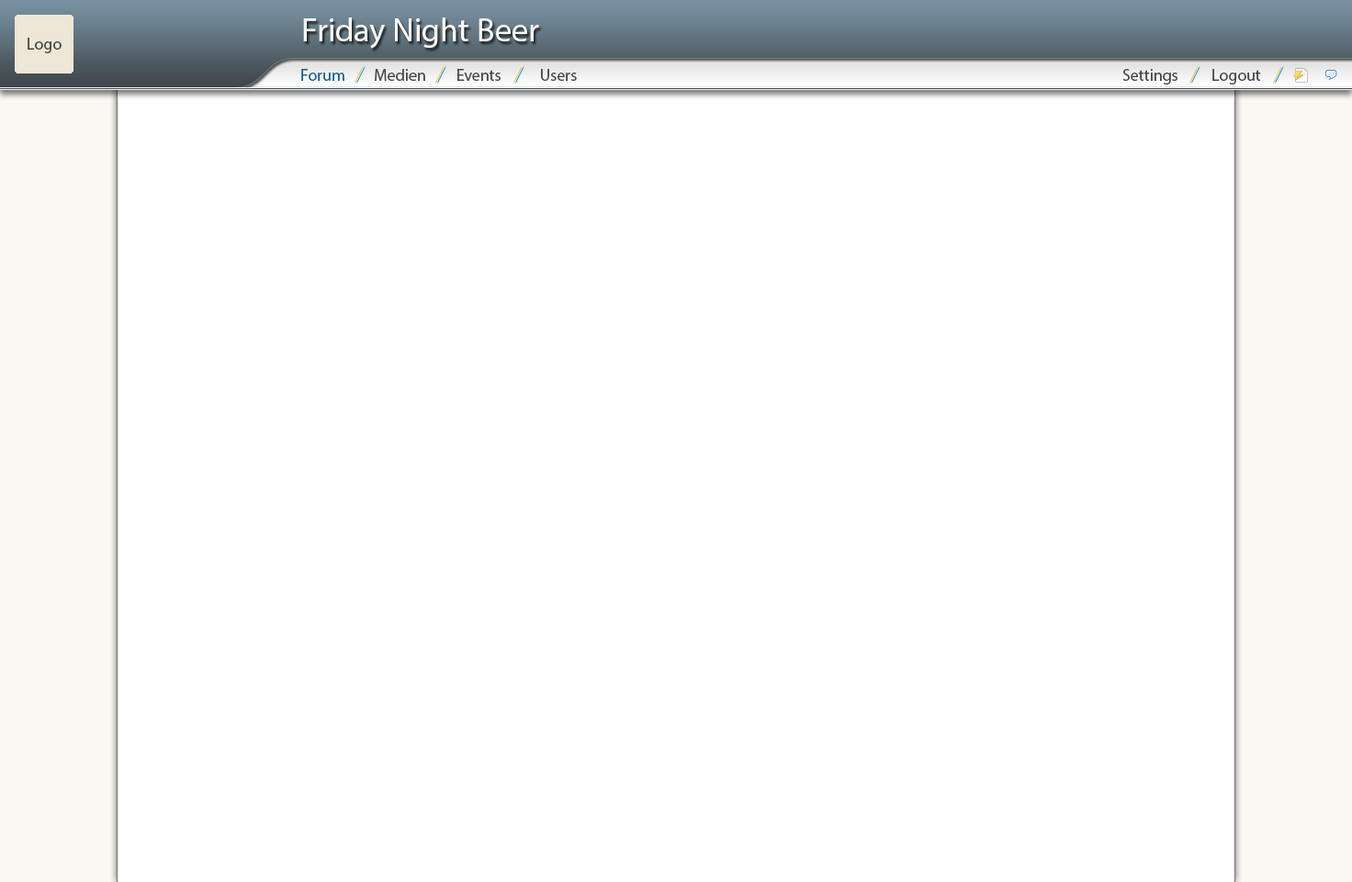
<style>
.page{position:relative;width:1352px;height:882px;background:#ffffff}
.page>*{position:absolute;margin:0}
.t1{font:33.1px "MyriadPro-Regular";color:#faf8f3}
.t2{font:16.5px "MyriadPro-Regular";color:#474747}
.t3{font:16.5px "MyriadPro-Regular";color:#12658c}
</style>
<div class="page">
<p class="t1" style="left:303px;top:17px;width:236px;height:32px">Friday Night Beer</p>
<p class="t2" style="left:28px;top:38px;width:34px;height:15px">Logo</p>
<p class="t3" style="left:301px;top:69px;width:43px;height:12px">Forum</p>
<p class="t2" style="left:375px;top:69px;width:50px;height:12px">Medien</p>
<p class="t2" style="left:457px;top:69px;width:44px;height:12px">Events</p>
<p class="t2" style="left:541px;top:69px;width:36px;height:12px">Users</p>
<p class="t2" style="left:1123px;top:69px;width:55px;height:16px">Settings</p>
<p class="t2" style="left:1213px;top:69px;width:48px;height:16px">Logout</p>
</div>
